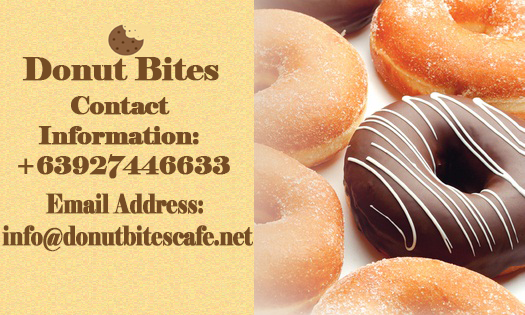
<style>
.page{position:relative;width:525px;height:315px}
.page>*{position:absolute;margin:0}
.t1{font:25px "Elephant-Regular";letter-spacing:-0.025em;color:#754c24;font-weight:bold}
.t2{font:26.7px "Elephant-Regular";letter-spacing:-0.025em;color:#754c24;font-weight:bold;scale:0.78 1}
</style>
<div class="page">
<p class="t1" style="left:18px;top:96px;width:212px;height:83px;text-align:center">Contact <br>Information: <br>+63927446633</p>
<p class="t2" style="left:2px;top:193px;width:251px;height:59px;text-align:center">Email Address: <br>info@donutbitescafe.net</p>
</div>
